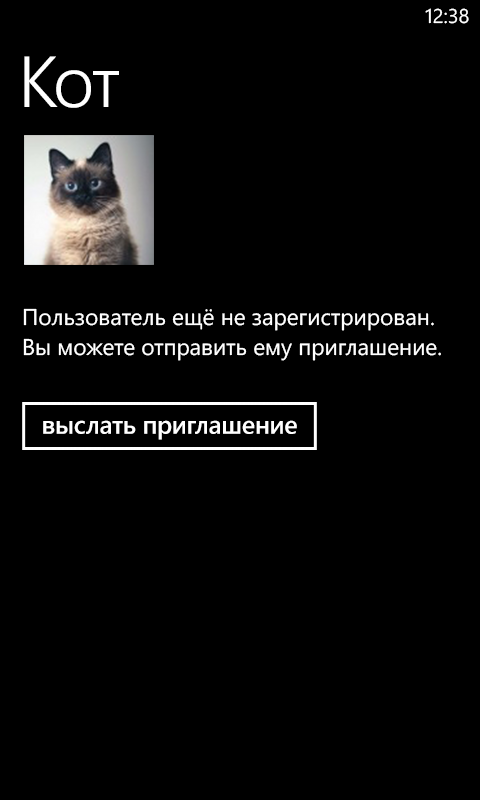
<style>
.page{position:relative;width:480px;height:800px;background:#000000}
.page>*{position:absolute;margin:0}
.t1{font:20px "SegoeWP";color:#ffffff}
.t2{font:72px "SegoeWP-SemiLight";letter-spacing:-0.01em;color:#ffffff}
.t3{font:22.7px/30.7px "SegoeWP";color:#ffffff}
.t4{font:25.3px "SegoeWP-Semibold";letter-spacing:-0.01em;color:#ffffff}
</style>
<div class="page">
<p class="t1" style="left:425px;top:8px;width:44px;height:16px">12:38</p>
<p class="t2" style="left:24px;top:56px;width:95px;height:52px">Кот</p>
<p class="t3" style="left:23px;top:308px;width:418px;height:53px">Пользователь ещё не зарегистрирован.<br>Вы можете отправить ему приглашение.</p>
<p class="t4" style="left:43px;top:420px;width:254px;height:20px">выслать приглашение</p>
</div>
